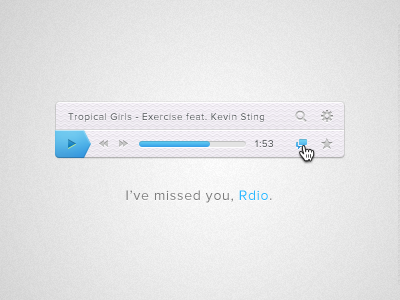
<style>
.page{position:relative;width:400px;height:300px}
.page>*{position:absolute;margin:0}
.t1{font:10px "ProximaNova-Regular";letter-spacing:0.05em;color:#494e50}
.t2{font:10px "ProximaNova-Regular";letter-spacing:0.05em}
.t3{font:14px "ProximaNova-Regular";letter-spacing:0.05em;color:#7b7b7b}
.t4{font:14px "ProximaNova-Regular";letter-spacing:0.05em;color:#2bb7ff}
</style>
<div class="page">
<p class="t1" style="left:68px;top:113px;width:196px;height:9px">Tropical Girls - Exercise feat. Kevin Sting</p>
<p class="t2" style="left:255px;top:140px;width:18px;height:7px">1:53</p>
<p class="t3" style="left:126px;top:190px;width:146px;height:13px">I’ve missed you, <span class="t4">Rdio</span>.</p>
</div>
